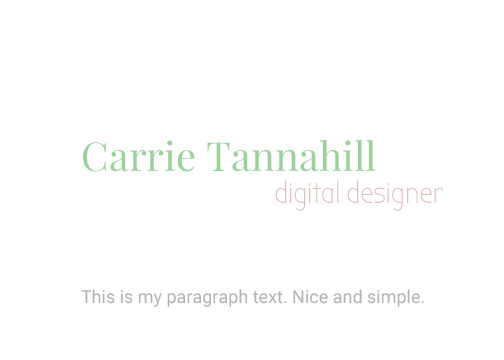
<style>
.page{position:relative;width:504px;height:360px;background:#ffffff}
.page>*{position:absolute;margin:0}
.t1{font:40px "PlayfairDisplay-Regular";color:#99d19c}
.t2{font:30px "BubblerOne-Regular";color:#ddc0be}
.t3{font:18px "Roboto-Regular";color:#b5b2b1}
</style>
<div class="page">
<p class="t1" style="left:83px;top:139px;width:293px;height:33px">Carrie Tannahill</p>
<p class="t2" style="left:275px;top:180px;width:168px;height:31px">digital designer</p>
<p class="t3" style="left:81px;top:289px;width:343px;height:18px">This is my paragraph text. Nice and simple.</p>
</div>
